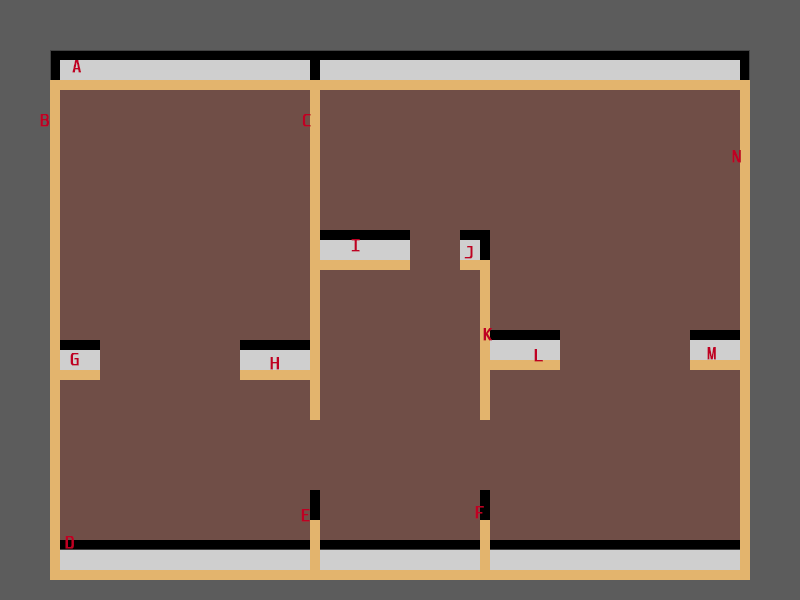
<style>
.page{position:relative;width:800px;height:600px;background:#704e47}
.page>*{position:absolute;margin:0}
.t1{font:12px "Unispace";color:#bf0023;font-weight:bold}
</style>
<div class="page">
<p class="t1" style="left:72px;top:60px;width:9px;height:13px">A</p>
<p class="t1" style="left:40px;top:114px;width:9px;height:13px">B</p>
<p class="t1" style="left:302px;top:114px;width:9px;height:13px">C</p>
<p class="t1" style="left:732px;top:150px;width:9px;height:13px">N</p>
<p class="t1" style="left:351px;top:239px;width:9px;height:13px">I</p>
<p class="t1" style="left:464px;top:246px;width:9px;height:13px">J</p>
<p class="t1" style="left:483px;top:328px;width:9px;height:13px">K</p>
<p class="t1" style="left:70px;top:353px;width:9px;height:13px">G</p>
<p class="t1" style="left:534px;top:349px;width:9px;height:13px">L</p>
<p class="t1" style="left:707px;top:347px;width:9px;height:13px">M</p>
<p class="t1" style="left:270px;top:357px;width:9px;height:13px">H</p>
<p class="t1" style="left:301px;top:509px;width:9px;height:13px">E</p>
<p class="t1" style="left:475px;top:506px;width:9px;height:13px">F</p>
<p class="t1" style="left:65px;top:536px;width:9px;height:13px">D</p>
</div>
